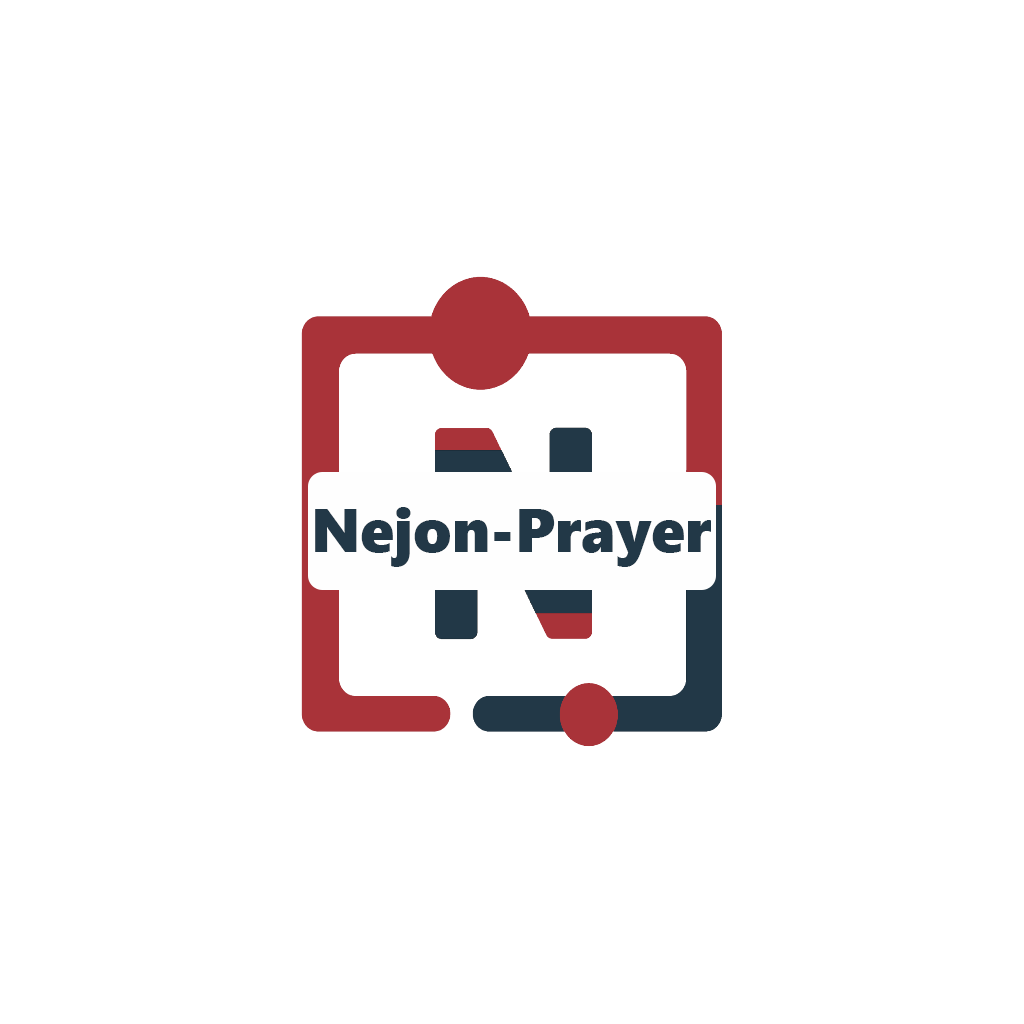
<style>
.page{position:relative;width:1024px;height:1024px;background:#ffffff}
.page>*{position:absolute;margin:0}
.t1{font:61px "SegoeUIBlack";color:#223847}
</style>
<div class="page">
<p class="t1" style="left:315px;top:507px;width:396px;height:60px">Nejon-Prayer</p>
</div>
